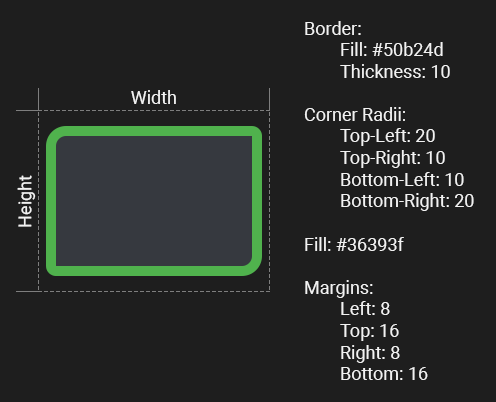
<style>
.page{position:relative;width:496px;height:402px;background:#1e1e1e}
.page>*{position:absolute;margin:0}
.t1{font:18px "Roboto-Regular";color:#f2f2f2}
</style>
<div class="page">
<p class="t1" style="left:304px;top:21px;width:170px;height:359px">Border:<br> Fill: #50b24d<br> Thickness: 10<br><br>Corner Radii:<br> Top-Left: 20<br> Top-Right: 10<br> Bottom-Left: 10<br> Bottom-Right: 20<br><br>Fill: #36393f<br><br>Margins:<br> Left: 8<br> Top: 16<br> Right: 8<br> Bottom: 16</p>
<p class="t1" style="left:131px;top:90px;width:45px;height:14px">Width</p>
<p class="t1" style="left:17px;top:175px;width:19px;height:52px;rotate:-90deg">Height</p>
</div>
